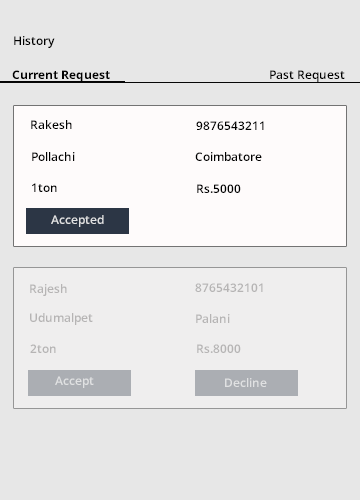
<style>
.page{position:relative;width:360px;height:500px;background:#e7e7e7}
.page>*{position:absolute;margin:0}
.t1{font:12px "OpenSans-Semibold";color:#000000}
.t2{font:12px "OpenSans-Bold";color:#000000}
.t3{font:12px "OpenSans-Semibold";color:#e0e1e2}
.t4{font:12px "OpenSans-Semibold";color:#b6b4b4}
</style>
<div class="page">
<p class="t1" style="left:14px;top:36px;width:41px;height:12px">History</p>
<p class="t2" style="left:12px;top:70px;width:98px;height:12px">Current Request</p>
<p class="t1" style="left:270px;top:70px;width:75px;height:12px">Past Request</p>
<p class="t1" style="left:31px;top:120px;width:41px;height:9px">Rakesh</p>
<p class="t1" style="left:196px;top:121px;width:68px;height:9px">9876543211</p>
<p class="t1" style="left:32px;top:152px;width:43px;height:9px">Pollachi</p>
<p class="t1" style="left:195px;top:152px;width:67px;height:9px">Coimbatore</p>
<p class="t1" style="left:32px;top:183px;width:25px;height:9px">1ton</p>
<p class="t1" style="left:197px;top:184px;width:44px;height:9px">Rs.5000</p>
<p class="t3" style="left:51px;top:215px;width:53px;height:12px">Accepted</p>
<p class="t4" style="left:30px;top:284px;width:37px;height:12px">Rajesh</p>
<p class="t4" style="left:195px;top:283px;width:68px;height:9px">8765432101</p>
<p class="t4" style="left:30px;top:313px;width:63px;height:12px">Udumalpet</p>
<p class="t4" style="left:196px;top:314px;width:34px;height:9px">Palani</p>
<p class="t4" style="left:30px;top:344px;width:26px;height:9px">2ton</p>
<p class="t4" style="left:197px;top:344px;width:44px;height:9px">Rs.8000</p>
<p class="t3" style="left:55px;top:376px;width:39px;height:12px">Accept</p>
<p class="t3" style="left:225px;top:378px;width:42px;height:9px">Decline</p>
</div>
